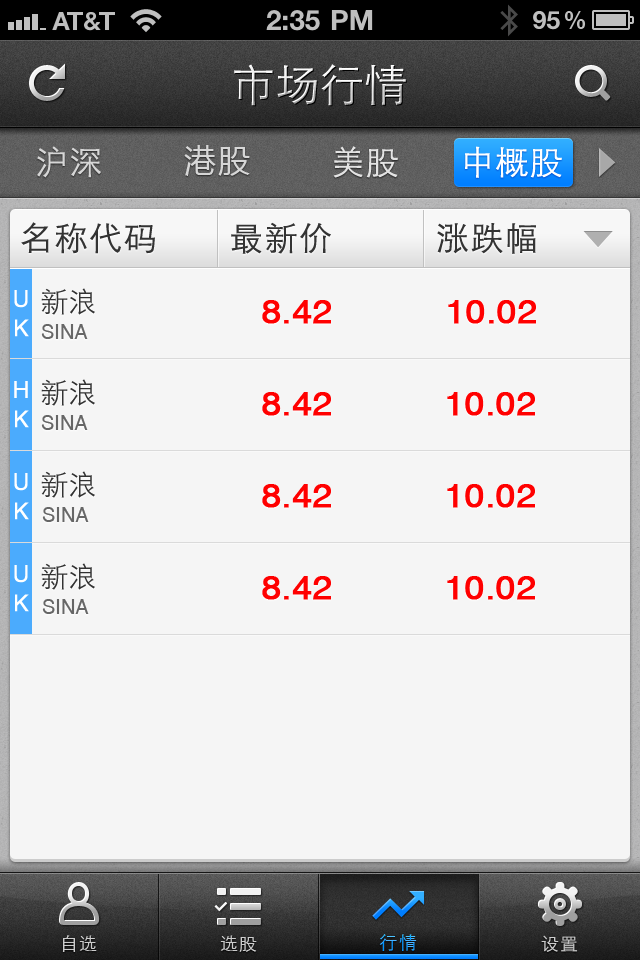
<style>
.page{position:relative;width:640px;height:960px;background:#f5f5f5}
.page>*{position:absolute;margin:0}
.t1{font:44px "STXihei";letter-spacing:0.005em}
.t2{font:33px "STXihei";letter-spacing:0.05em;color:#d6d6d6}
.t3{font:32px "MicrosoftYaHei";letter-spacing:0.05em;color:#d6d6d6}
.t4{font:33px "STXihei";letter-spacing:0.05em;color:#e3e3e3}
.t5{font:33px "STXihei";letter-spacing:0.05em;color:#ffffff}
.t6{font:33px "STXihei";letter-spacing:0.05em;color:#333333}
.t7{font:23px/19px "HelveticaCE-Regular";color:#ffffff}
.t8{font:28px "STXihei";color:#333333}
.t9{font:33.2px "HelveticaCE-Regular";color:#ff0000;font-weight:bold;scale:1.05 1}
.t10{font:20px "HelveticaCE-Regular";color:#5c6370}
.t11{font:18px "STXihei";letter-spacing:0.05em;color:#cccccc}
.t12{font:18px "STXihei";letter-spacing:0.1em}
</style>
<div class="page">
<p class="t1" style="left:234px;top:64px;width:172px;height:42px">市场行情</p>
<p class="t2" style="left:37px;top:146px;width:64px;height:32px">沪深</p>
<p class="t3" style="left:184px;top:145px;width:66px;height:31px">港股</p>
<p class="t4" style="left:333px;top:146px;width:65px;height:32px">美股</p>
<p class="t5" style="left:465px;top:146px;width:97px;height:32px">中概股</p>
<p class="t6" style="left:21px;top:222px;width:134px;height:32px">名称代码</p>
<p class="t6" style="left:231px;top:222px;width:100px;height:32px">最新价</p>
<p class="t6" style="left:437px;top:223px;width:99px;height:31px">涨跌幅</p>
<p class="t7" style="left:14px;top:290px;width:15px;height:47px">U K</p>
<p class="t8" style="left:41px;top:288px;width:54px;height:27px">新浪</p>
<p class="t9" style="left:262px;top:300px;width:69px;height:24px">8.42</p>
<p class="t9" style="left:448px;top:300px;width:88px;height:24px">10.02</p>
<p class="t10" style="left:41px;top:324px;width:47px;height:15px">SINA</p>
<p class="t7" style="left:14px;top:381px;width:15px;height:47px">H K</p>
<p class="t8" style="left:41px;top:379px;width:54px;height:27px">新浪</p>
<p class="t9" style="left:262px;top:392px;width:69px;height:24px">8.42</p>
<p class="t9" style="left:447px;top:392px;width:88px;height:24px">10.02</p>
<p class="t10" style="left:41px;top:415px;width:47px;height:15px">SINA</p>
<p class="t7" style="left:14px;top:473px;width:15px;height:47px">U K</p>
<p class="t8" style="left:41px;top:471px;width:54px;height:27px">新浪</p>
<p class="t9" style="left:262px;top:484px;width:69px;height:24px">8.42</p>
<p class="t9" style="left:447px;top:484px;width:88px;height:24px">10.02</p>
<p class="t10" style="left:42px;top:507px;width:47px;height:15px">SINA</p>
<p class="t7" style="left:14px;top:565px;width:15px;height:47px">U K</p>
<p class="t8" style="left:41px;top:563px;width:54px;height:27px">新浪</p>
<p class="t9" style="left:262px;top:576px;width:69px;height:24px">8.42</p>
<p class="t9" style="left:447px;top:576px;width:88px;height:24px">10.02</p>
<p class="t10" style="left:42px;top:599px;width:47px;height:15px">SINA</p>
<p class="t11" style="left:62px;top:935px;width:35px;height:17px">自选</p>
<p class="t11" style="left:220px;top:935px;width:37px;height:17px">选股</p>
<p class="t12" style="left:379px;top:934px;width:38px;height:17px">行情</p>
<p class="t11" style="left:541px;top:935px;width:37px;height:17px">设置</p>
</div>
